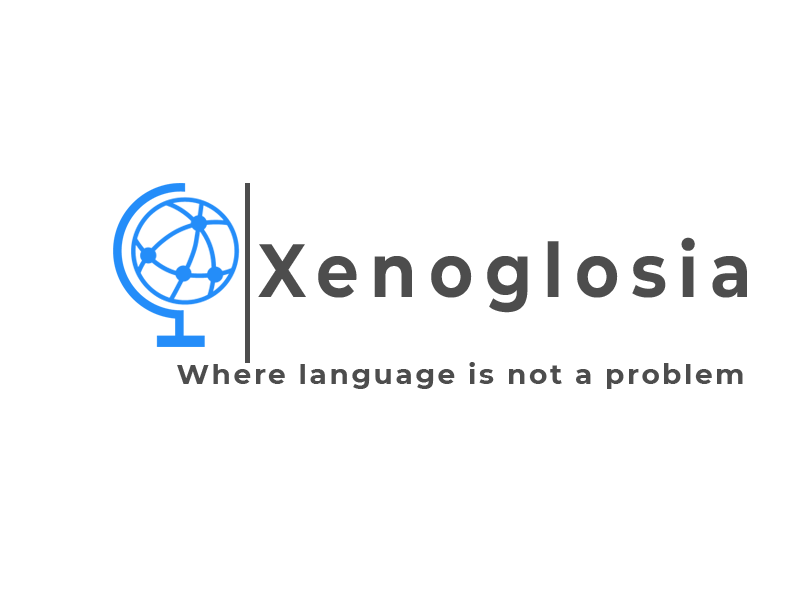
<style>
.page{position:relative;width:800px;height:600px;background:#ffffff}
.page>*{position:absolute;margin:0}
.t1{font:75.3px "Montserrat-Bold";letter-spacing:0.17em;color:#4d4d4d;scale:0.9 1}
.t2{font:28px "Montserrat-Bold";letter-spacing:0.09em;color:#4d4d4d}
</style>
<div class="page">
<p class="t1" style="left:258px;top:237px;width:489px;height:76px">Xenoglosia</p>
<p class="t2" style="left:177px;top:362px;width:566px;height:27px">Where language is not a problem</p>
</div>
